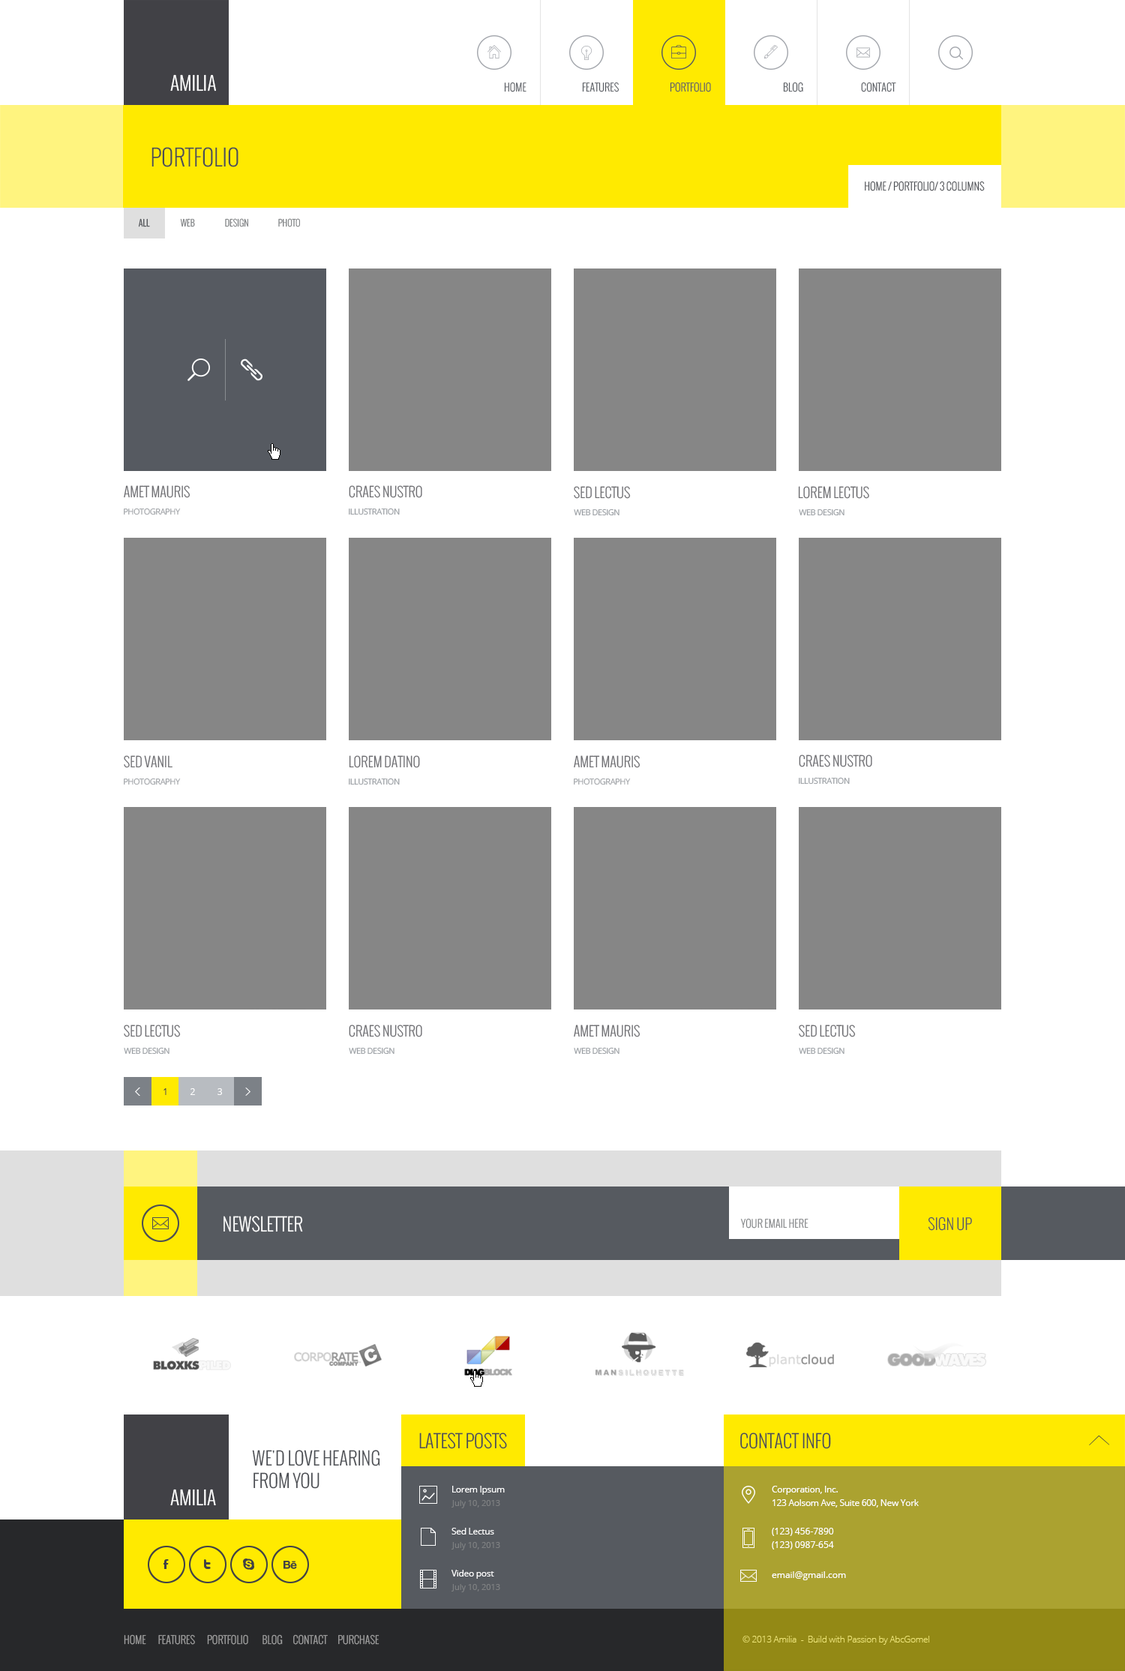
<style>
.page{position:relative;width:1125px;height:1671px;background:#ffffff}
.page>*{position:absolute;margin:0}
.t1{font:18.7px "Oswald-Light";color:#ffffff;text-transform:uppercase}
.t2{font:10.5px "Oswald-Light";color:#565a60;text-transform:uppercase}
.t3{font:22.5px "Oswald-Light";color:#4b4e53;text-transform:uppercase}
.t4{font:10.5px "Oswald-Light";color:#4b4e53;text-transform:uppercase}
.t5{font:9px "Oswald-Light";color:#4b4e53;text-transform:uppercase}
.t6{font:9px "Oswald-Light";color:#7e8082;text-transform:uppercase}
.t7{font:13.5px "Oswald-Light";color:#6f6f73;text-transform:uppercase}
.t8{font:8.2px "OpenSans";letter-spacing:-0.05em;color:#9fa2a6;text-transform:uppercase}
.t9{font:8.2px "OpenSans";letter-spacing:-0.05em;color:#979ca1;text-transform:uppercase}
.t10{font:9px "OpenSans";color:#414146}
.t11{font:9px "OpenSans";color:#ffffff}
.t12{font:18px "Oswald-Light";color:#ffffff}
.t13{font:15px "Oswald-Light";color:#565a60}
.t14{font:10.5px "Oswald-Light";letter-spacing:0.005em;color:#7e8082;text-transform:uppercase}
.t15{font:18px "Oswald-Light";color:#4b4e53}
.t16{font:18px/22.5px "Oswald-Light";color:#4b4e53;text-transform:uppercase}
.t17{font:9px/13.5px "OpenSans";letter-spacing:-0.025em;color:#ffffff}
.t18{font:8.2px "OpenSans";color:#7e8082}
.t19{font:9px "OpenSans";letter-spacing:-0.025em;color:#ffffff}
.t20{font:9px/13.5px "OpenSans";color:#ffffff}
.t21{font:10.5px "Oswald-Light";color:#a1a1a1}
.t22{font:9px "OpenSans-Light";letter-spacing:-0.025em;color:#eee575}
</style>
<div class="page">
<p class="t1" style="left:170px;top:74px;width:46px;height:18px">AMILIA</p>
<p class="t2" style="left:504px;top:82px;width:22px;height:10px">Home</p>
<p class="t2" style="left:582px;top:82px;width:38px;height:10px">features</p>
<p class="t2" style="left:670px;top:82px;width:41px;height:10px">PORTFOLIO</p>
<p class="t2" style="left:783px;top:82px;width:20px;height:10px">BLOG</p>
<p class="t2" style="left:861px;top:82px;width:35px;height:10px">CONTACT</p>
<p class="t3" style="left:152px;top:147px;width:86px;height:20px">PorTFOLIO</p>
<p class="t4" style="left:865px;top:181px;width:120px;height:10px">home / portfolio/ 3 columns</p>
<p class="t5" style="left:138px;top:218px;width:12px;height:9px">All</p>
<p class="t6" style="left:180px;top:218px;width:15px;height:9px">Web</p>
<p class="t6" style="left:225px;top:218px;width:23px;height:9px">Design</p>
<p class="t6" style="left:278px;top:218px;width:22px;height:9px">Photo</p>
<p class="t7" style="left:124px;top:485px;width:66px;height:13px">Amet Mauris</p>
<p class="t7" style="left:349px;top:485px;width:73px;height:13px">Craes Nustro</p>
<p class="t7" style="left:574px;top:486px;width:57px;height:13px">Sed Lectus</p>
<p class="t7" style="left:798px;top:486px;width:71px;height:13px">Lorem Lectus</p>
<p class="t8" style="left:124px;top:508px;width:57px;height:7px">photography</p>
<p class="t9" style="left:349px;top:508px;width:51px;height:7px"><span class="t8"><br></span>illustration</p>
<p class="t9" style="left:574px;top:508px;width:46px;height:8px"><span class="t8"><br></span>web design</p>
<p class="t9" style="left:799px;top:508px;width:45px;height:8px"><span class="t8"><br></span>web design</p>
<p class="t7" style="left:124px;top:755px;width:48px;height:13px">SeD VaNiL</p>
<p class="t7" style="left:349px;top:755px;width:71px;height:13px">LOREM DAtINo</p>
<p class="t7" style="left:574px;top:755px;width:66px;height:13px">Amet Mauris</p>
<p class="t7" style="left:799px;top:754px;width:73px;height:13px">Craes Nustro</p>
<p class="t8" style="left:124px;top:778px;width:57px;height:7px">photography</p>
<p class="t9" style="left:349px;top:778px;width:51px;height:7px"><span class="t8"><br></span>illustration</p>
<p class="t8" style="left:574px;top:778px;width:57px;height:7px">photography</p>
<p class="t9" style="left:799px;top:777px;width:51px;height:7px"><span class="t8"><br></span>illustration</p>
<p class="t7" style="left:124px;top:1024px;width:57px;height:13px">Sed Lectus</p>
<p class="t7" style="left:349px;top:1024px;width:73px;height:13px">Craes nustro</p>
<p class="t7" style="left:574px;top:1024px;width:66px;height:13px">amet mauris</p>
<p class="t7" style="left:799px;top:1024px;width:57px;height:13px">Sed Lectus</p>
<p class="t9" style="left:124px;top:1047px;width:46px;height:7px"><span class="t8"><br></span>web design</p>
<p class="t9" style="left:349px;top:1047px;width:45px;height:7px"><span class="t8"><br></span>web design</p>
<p class="t9" style="left:574px;top:1047px;width:46px;height:7px"><span class="t8"><br></span>web design</p>
<p class="t9" style="left:799px;top:1047px;width:45px;height:7px"><span class="t8"><br></span>web design</p>
<p class="t10" style="left:164px;top:1088px;width:2px;height:7px">1</p>
<p class="t11" style="left:190px;top:1088px;width:5px;height:7px">2</p>
<p class="t11" style="left:218px;top:1088px;width:4px;height:7px">3</p>
<p class="t12" style="left:224px;top:1216px;width:79px;height:16px">NEWSLETTER</p>
<p class="t13" style="left:928px;top:1216px;width:44px;height:15px">SIGN UP</p>
<p class="t14" style="left:740px;top:1218px;width:68px;height:10px">Your email here</p>
<p class="t15" style="left:419px;top:1432px;width:88px;height:17px">LATEST POSTS</p>
<p class="t15" style="left:740px;top:1432px;width:91px;height:17px">CONTACT INFO</p>
<p class="t16" style="left:252px;top:1450px;width:128px;height:39px">we'd love hearing <br>from you</p>
<p class="t1" style="left:170px;top:1489px;width:46px;height:17px">AMILIA</p>
<p class="t17" style="left:452px;top:1486px;width:53px;height:9px">Lorem Ipsum<br>ipsumage post</p>
<p class="t17" style="left:772px;top:1486px;width:147px;height:22px">Corporation, Inc.<br>123 Aolsom Ave, Suite 600, New York</p>
<p class="t18" style="left:452px;top:1500px;width:48px;height:8px">July 10, 2013</p>
<p class="t19" style="left:452px;top:1528px;width:42px;height:6px">Sed Lectus</p>
<p class="t20" style="left:772px;top:1528px;width:62px;height:22px">(123) 456-7890<br>(123) 0987-654</p>
<p class="t18" style="left:452px;top:1542px;width:48px;height:8px">July 10, 2013</p>
<p class="t19" style="left:452px;top:1570px;width:42px;height:9px">Video post</p>
<p class="t11" style="left:772px;top:1571px;width:74px;height:9px">email@gmail.com</p>
<p class="t18" style="left:452px;top:1584px;width:48px;height:8px">July 10, 2013</p>
<p class="t21" style="left:124px;top:1634px;width:256px;height:11px">HOME       FEATURES       PORTFOLIO        BLOG      CONTACT      PURCHASE</p>
<p class="t22" style="left:742px;top:1636px;width:187px;height:9px">© 2013 Amilia  -  Build with Passion by AbcGomel</p>
</div>
